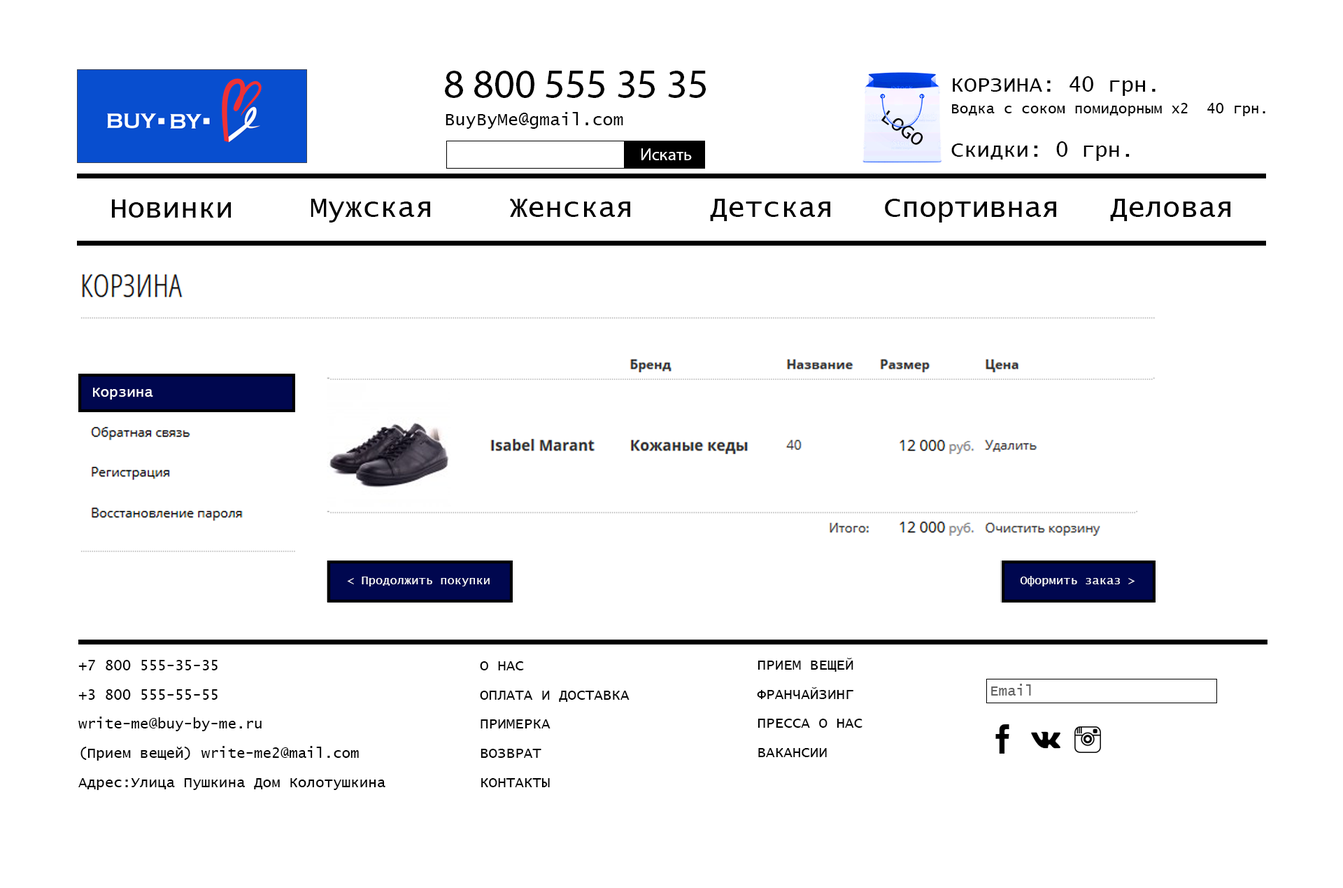
<style>
.page{position:relative;width:1343px;height:888px;background:#ffffff}
.page>*{position:absolute;margin:0}
.t1{font:40.8px "MyriadPro-Regular";color:#000000}
.t2{font:14.6px/21.6px "LucidaConsole";color:#000000}
.t3{font:21.6px/21.6px "LucidaConsole";color:#000000}
.t4{font:17.5px "LucidaConsole";color:#000000}
.t5{font:17.5px "MyriadPro-Regular";color:#ffffff}
.t6{font:29.1px "LucidaConsole";color:#000000}
.t7{font:14.6px "LucidaConsole";color:#ffffff}
.t8{font:11.9px "LucidaConsole";color:#ffffff}
.t9{font:14.6px/29.1px "LucidaConsole";color:#010101}
.t10{font:14.6px/29.1px "LucidaConsole";color:#000000}
.t11{font:14.6px "LucidaConsole";color:#616161}
</style>
<div class="page">
<p class="t1" style="left:445px;top:71px;width:261px;height:27px">8 800 555 35 35</p>
<p class="t2" style="left:951px;top:76px;width:315px;height:85px"><span class="t3">КОРЗИНА: 40 грн.<br></span>Водка с соком помидорным х2  40 грн.<br><br><span class="t3">Скидки: 0 грн.</span></p>
<p class="t4" style="left:446px;top:112px;width:177px;height:17px">BuyByMe@gmail.com</p>
<p class="t5" style="left:642px;top:148px;width:50px;height:12px">Искать</p>
<p class="t6" style="left:112px;top:199px;width:119px;height:19px">Новинки</p>
<p class="t6" style="left:311px;top:199px;width:119px;height:23px">Мужская</p>
<p class="t6" style="left:510px;top:199px;width:120px;height:18px">Женская</p>
<p class="t6" style="left:710px;top:199px;width:120px;height:22px">Детская</p>
<p class="t6" style="left:885px;top:199px;width:171px;height:23px">Спортивная</p>
<p class="t6" style="left:1110px;top:199px;width:121px;height:22px">Деловая</p>
<p class="t7" style="left:93px;top:388px;width:60px;height:11px">Корзина</p>
<p class="t8" style="left:347px;top:576px;width:143px;height:10px">&lt; Продолжить покупки</p>
<p class="t8" style="left:1020px;top:576px;width:115px;height:10px">Оформить заказ &gt;</p>
<p class="t9" style="left:78px;top:660px;width:307px;height:130px">+7 800 555-35-35<br>+3 800 555-55-55<br>write-me@buy-by-me.ru<br>(Прием вещей) write-me2@mail.com<br>Адрес:Улица Пушкина Дом Колотушкина</p>
<p class="t10" style="left:480px;top:661px;width:150px;height:126px">О НАС<br>ОПЛАТА И ДОСТАВКА<br>ПРИМЕРКА<br>ВОЗВРАТ<br>КОНТАКТЫ</p>
<p class="t10" style="left:757px;top:658px;width:106px;height:99px">ПРИЕМ ВЕЩЕЙ<br>ФРАНЧАЙЗИНГ<br>ПРЕССА О НАС<br>ВАКАНСИИ</p>
<p class="t11" style="left:991px;top:683px;width:40px;height:12px">Email</p>
</div>
